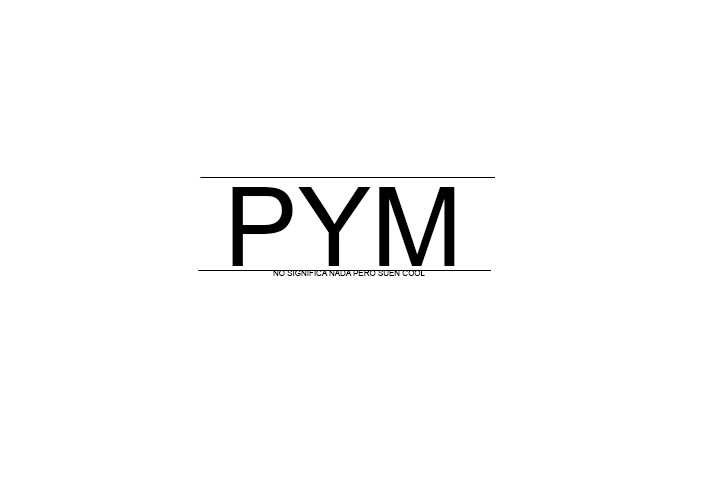
<style>
.page{position:relative;width:720px;height:480px;background:#ffffff}
.page>*{position:absolute;margin:0}
.t1{font:110.2px "ArialMT";color:#000000}
.t2{font:8px "ArialMT";color:#000000}
</style>
<div class="page">
<p class="t1" style="left:232px;top:187px;width:223px;height:79px">PYM</p>
<p class="t2" style="left:273px;top:270px;width:152px;height:6px">NO SIGNIFICA NADA PERO SUEN COOL</p>
</div>
